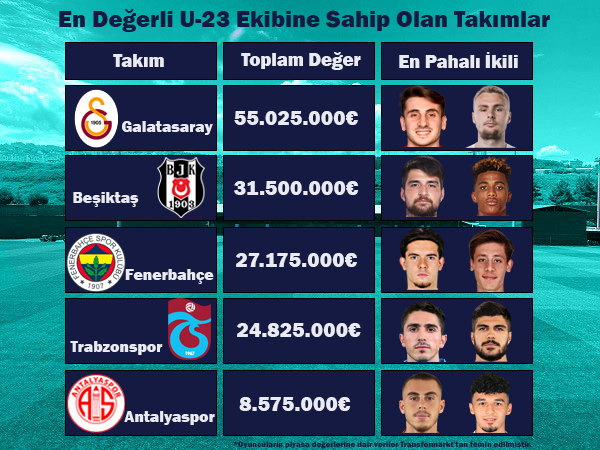
<style>
.page{position:relative;width:600px;height:450px;background:#151a42}
.page>*{position:absolute;margin:0}
.t1{font:24px "FranklinGothic-Heavy";color:#151a42}
.t2{font:18.7px "FranklinGothic-Heavy";color:#e9eaf2}
.t3{font:21.3px "FranklinGothic-Heavy";color:#e9eaf2}
.t4{font:16px "FranklinGothic-Heavy";color:#e9eaf2}
.t5{font:8px "FranklinGothic-Heavy";color:#151a42}
</style>
<div class="page">
<p class="t1" style="left:59px;top:9px;width:491px;height:23px">En Değerli U-23 Ekibine Sahip Olan Takımlar</p>
<p class="t2" style="left:113px;top:54px;width:51px;height:13px">Takım</p>
<p class="t2" style="left:241px;top:52px;width:120px;height:18px">Toplam Değer</p>
<p class="t2" style="left:399px;top:52px;width:119px;height:16px">En Pahalı İkili</p>
<p class="t3" style="left:234px;top:111px;width:124px;height:14px">55.025.000€</p>
<p class="t4" style="left:122px;top:121px;width:91px;height:14px">Galatasaray</p>
<p class="t3" style="left:234px;top:181px;width:125px;height:14px">31.500.000€</p>
<p class="t4" style="left:73px;top:192px;width:66px;height:15px">Beşiktaş</p>
<p class="t3" style="left:236px;top:253px;width:121px;height:14px">27.175.000€</p>
<p class="t4" style="left:125px;top:269px;width:89px;height:15px">Fenerbahçe</p>
<p class="t3" style="left:237px;top:323px;width:124px;height:14px">24.825.000€</p>
<p class="t4" style="left:70px;top:341px;width:93px;height:14px">Trabzonspor</p>
<p class="t3" style="left:239px;top:397px;width:112px;height:14px">8.575.000€</p>
<p class="t4" style="left:124px;top:411px;width:91px;height:14px">Antalyaspor</p>
<p class="t5" style="left:233px;top:441px;width:299px;height:8px">*Oyuncuların piyasa değerlerine dair veriler Transfermarkt’tan temin edilmiştir.</p>
</div>
